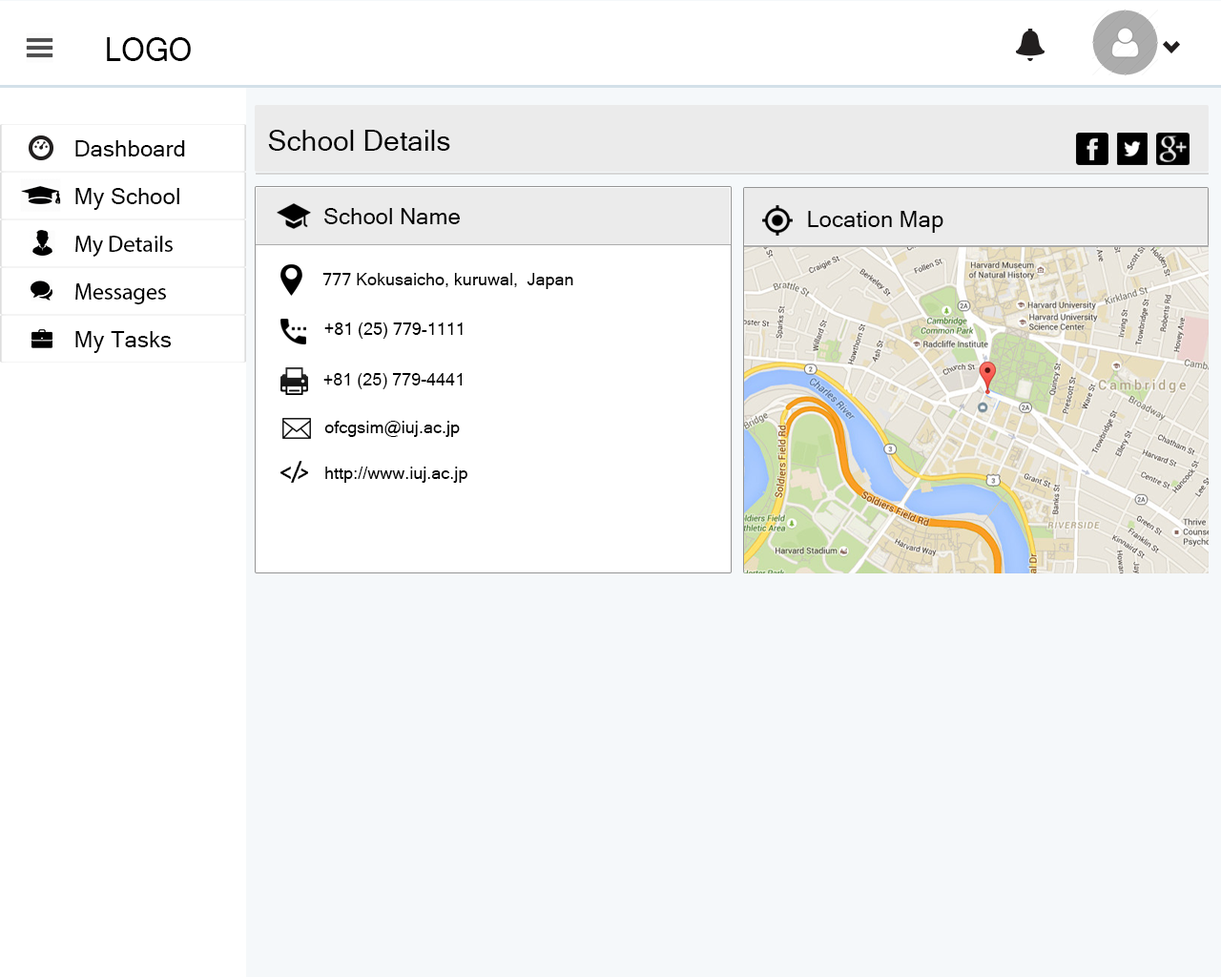
<style>
.page{position:relative;width:1221px;height:977px;background:#ffffff}
.page>*{position:absolute;margin:0}
.t1{font:32.7px "MicrosoftSansSerif";color:#000000;scale:0.93 1}
.t2{font:28.6px "MicrosoftSansSerif";color:#000000}
.t3{font:22.9px "MicrosoftSansSerif";color:#000000}
.t4{font:22.9px "MyriadPro-Regular";color:#000000}
.t5{font:17.2px "MicrosoftSansSerif";color:#000000}
.t6{font:17.2px "ArialMT";color:#000000}
</style>
<div class="page">
<p class="t1" style="left:107px;top:37px;width:84px;height:24px">LOGO</p>
<p class="t2" style="left:268px;top:130px;width:182px;height:21px">School Details</p>
<p class="t3" style="left:75px;top:140px;width:110px;height:16px">Dashboard</p>
<p class="t3" style="left:75px;top:188px;width:104px;height:22px">My School</p>
<p class="t3" style="left:324px;top:208px;width:136px;height:16px">School Name</p>
<p class="t3" style="left:808px;top:211px;width:135px;height:22px">Location Map</p>
<p class="t4" style="left:75px;top:236px;width:98px;height:21px">My Details</p>
<p class="t5" style="left:322px;top:273px;width:251px;height:16px">777 Kokusaicho, kuruwal,  Japan</p>
<p class="t4" style="left:75px;top:283px;width:91px;height:21px">Messages</p>
<p class="t5" style="left:324px;top:322px;width:139px;height:17px">+81 (25) 779-1111</p>
<p class="t3" style="left:75px;top:331px;width:97px;height:22px">My Tasks</p>
<p class="t6" style="left:323px;top:373px;width:140px;height:16px">+81 (25) 779-4441</p>
<p class="t5" style="left:324px;top:421px;width:136px;height:16px">ofcgsim@iuj.ac.jp</p>
<p class="t5" style="left:325px;top:466px;width:142px;height:17px">http://www.iuj.ac.jp</p>
</div>
